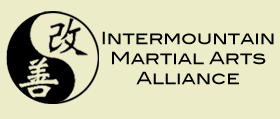
<style>
.page{position:relative;width:280px;height:119px;background:#ececc8}
.page>*{position:absolute;margin:0}
.t1{font:16.7px "BlairMdITCTTMedium";color:#000000}
</style>
<div class="page">
<p class="t1" style="left:102px;top:31px;width:172px;height:54px;text-align:center">Intermountain<br>Martial Arts<br>Alliance</p>
</div>
